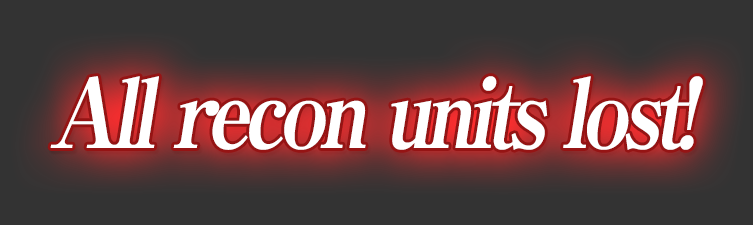
<style>
.page{position:relative;width:753px;height:225px;background:#333333}
.page>*{position:absolute;margin:0}
.t1{font:96px "RyuminPro-ExBold";letter-spacing:-0.08em;color:#ffffff;font-style:italic;scale:0.9 1}
</style>
<div class="page">
<p class="t1" style="left:50px;top:76px;width:653px;height:74px">All recon units lost!</p>
</div>
